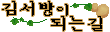
<style>
.page{position:relative;width:110px;height:32px;background:#ffffff}
.page>*{position:absolute;margin:0}
.t1{font:18px "Sam3KRFont";letter-spacing:0.01em;color:#000000}
.t2{font:15px "Sam3KRFont";letter-spacing:0.01em;color:#000000}
</style>
<div class="page">
<p class="t1" style="left:2px;top:1px;width:66px;height:15px">김서방<span class="t2">이</span></p>
<p class="t1" style="left:51px;top:16px;width:51px;height:15px">되는길</p>
</div>
